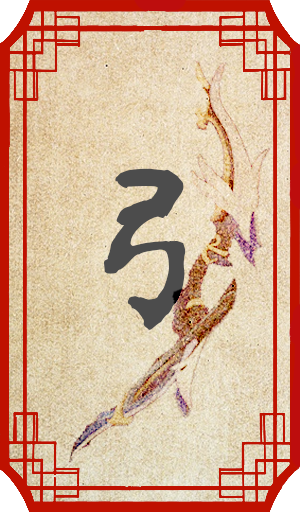
<style>
.page{position:relative;width:300px;height:512px}
.page>*{position:absolute;margin:0}
.t1{font:200px "JSYB-KSCpc-EUC-H";letter-spacing:-0.05em;color:#4c4c4c}
</style>
<div class="page">
<p class="t1" style="left:104px;top:168px;width:82px;height:162px">弓</p>
</div>
